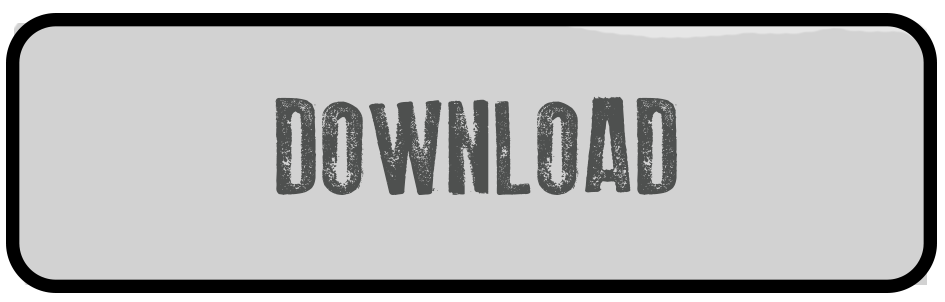
<style>
.page{position:relative;width:945px;height:302px;background:#d2d2d2}
.page>*{position:absolute;margin:0}
.t1{font:133.3px "OldPress";color:#4e504f}
</style>
<div class="page">
<p class="t1" style="left:275px;top:96px;width:403px;height:99px">DOWNLOAD</p>
</div>
